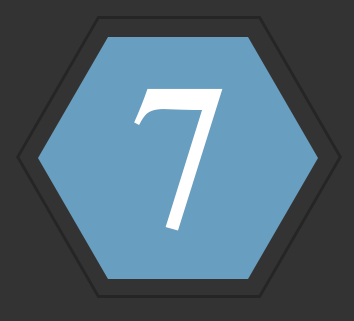
<style>
.page{position:relative;width:354px;height:321px;background:#333333}
.page>*{position:absolute;margin:0}
.t1{font:280px "Rod";color:#ffffff}
</style>
<div class="page">
<p class="t1" style="left:134px;top:88px;width:89px;height:143px">7</p>
</div>
